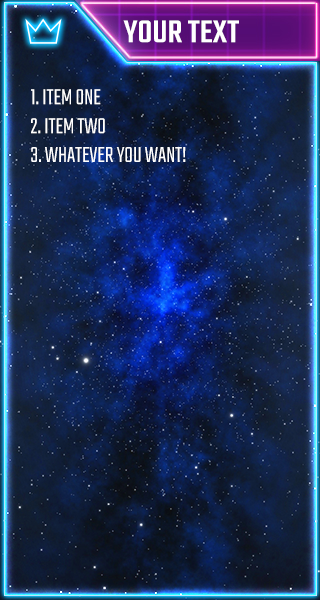
<style>
.page{position:relative;width:320px;height:600px}
.page>*{position:absolute;margin:0}
.t1{font:34.6px "Teko-Medium";color:#ffffff;text-transform:uppercase}
.t2{font:24px "Teko-Light";color:#ffffff;text-transform:uppercase}
</style>
<div class="page">
<p class="t1" style="left:123px;top:20px;width:116px;height:23px">Your text</p>
<p class="t2" style="left:31px;top:89px;width:155px;height:73px">1. Item One<br>2. Item two<br>3. whatever you want!</p>
</div>
